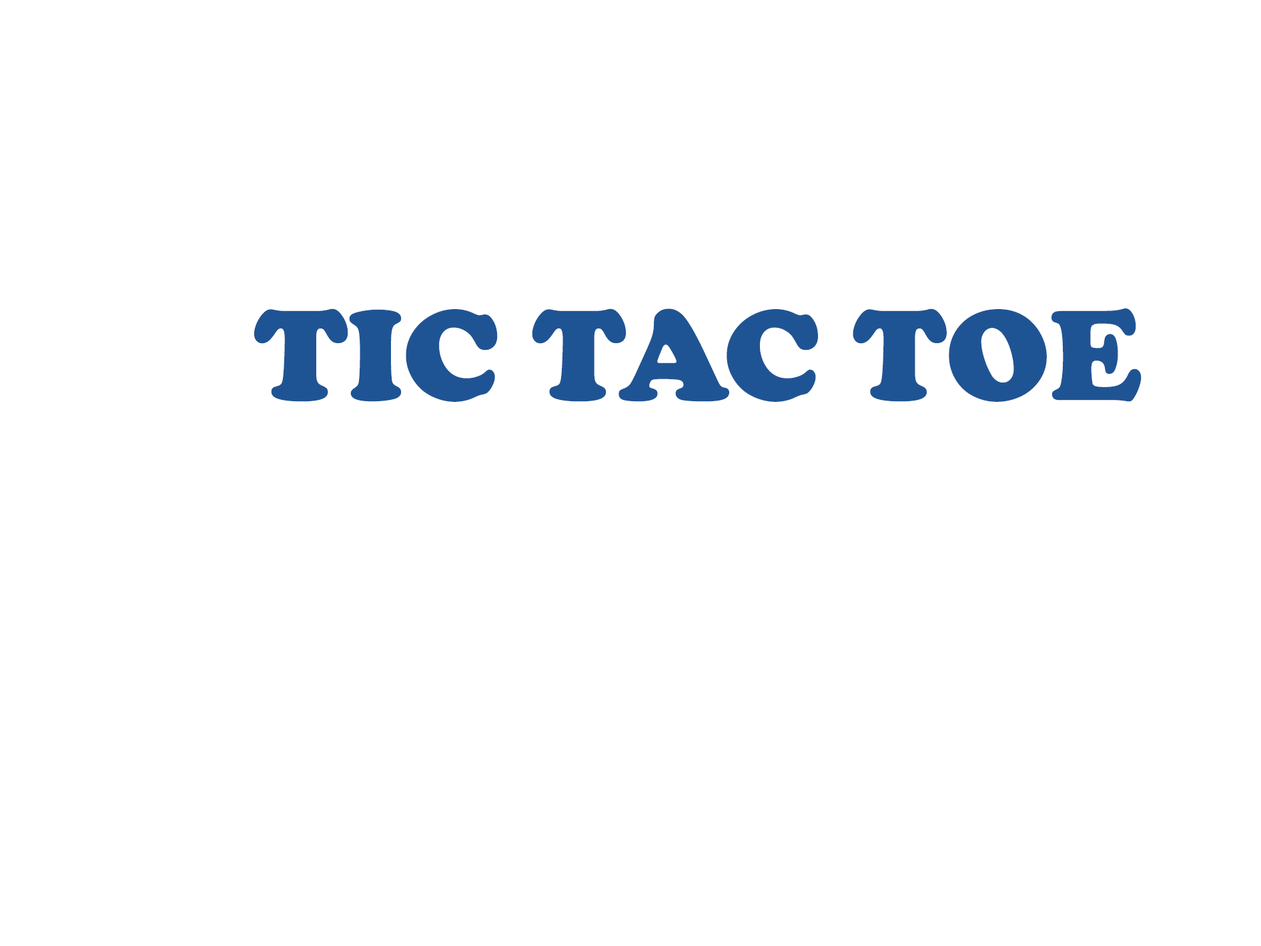
<style>
.page{position:relative;width:1261px;height:946px;background:#ffffff}
.page>*{position:absolute;margin:0}
.t1{font:133.5px "CooperBlack";color:#1f5494}
</style>
<div class="page">
<p class="t1" style="left:254px;top:308px;width:888px;height:94px">TIC TAC TOE</p>
</div>
